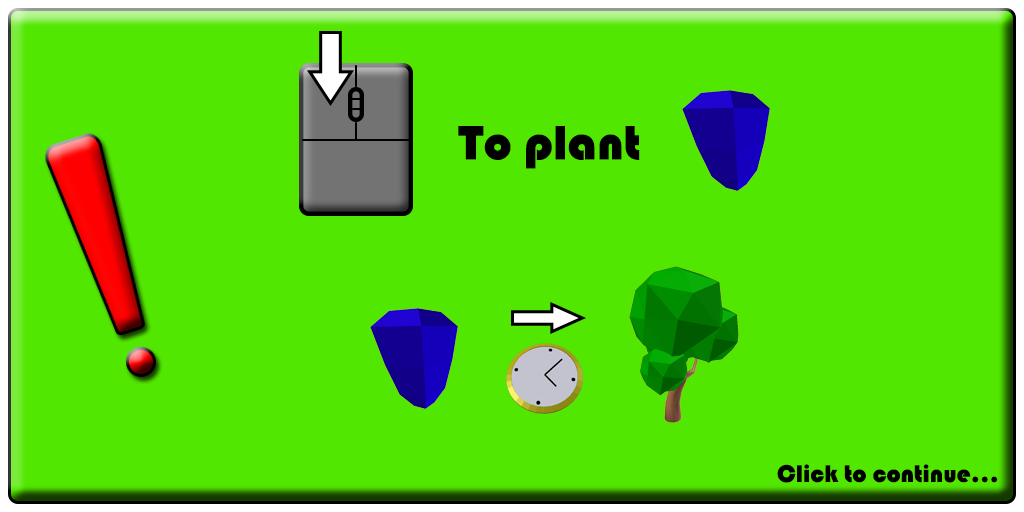
<style>
.page{position:relative;width:1024px;height:512px;background:#52e700}
.page>*{position:absolute;margin:0}
.t1{font:50px "Bauhaus93";color:#000000}
.t2{font:25px "Bauhaus93";color:#000000}
</style>
<div class="page">
<p class="t1" style="left:458px;top:126px;width:182px;height:43px">To plant</p>
<p class="t2" style="left:777px;top:464px;width:221px;height:19px">Click to continue...</p>
</div>
